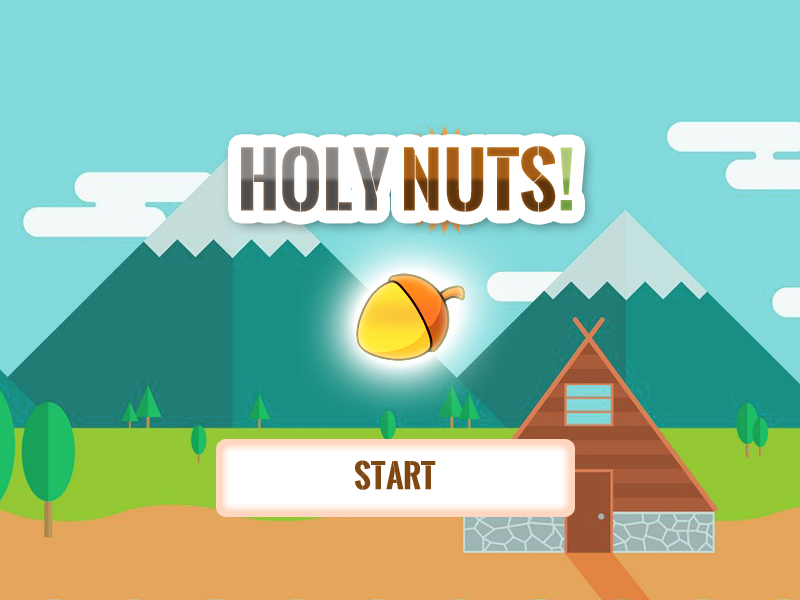
<style>
.page{position:relative;width:800px;height:600px;background:#82dadc}
.page>*{position:absolute;margin:0}
.t1{font:72px "OswaldStencil-Bold";font-weight:bold}
.t2{font:32.1px "OswaldStencil-Bold";color:#7e5213;font-weight:bold}
</style>
<div class="page">
<p class="t1" style="left:241px;top:146px;width:332px;height:66px">Holy Nuts!</p>
<p class="t2" style="left:355px;top:460px;width:81px;height:30px">START</p>
</div>
